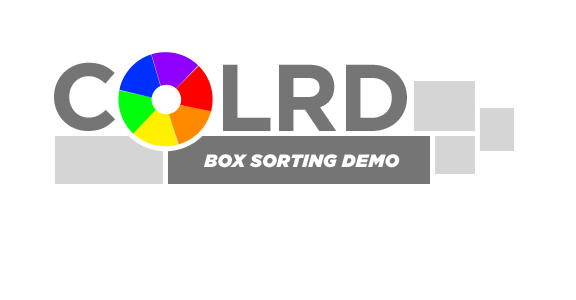
<style>
.page{position:relative;width:576px;height:300px;background:#ffffff}
.page>*{position:absolute;margin:0}
.t1{font:94.6px "GothamHTF-Bold";letter-spacing:-0.005em;color:#757575;text-transform:uppercase}
.t2{font:18px "GothamHTF-UltraItalic";letter-spacing:0.02em;color:#ffffff;text-transform:uppercase}
</style>
<div class="page">
<p class="t1" style="left:54px;top:62px;width:61px;height:69px">c</p>
<p class="t1" style="left:223px;top:64px;width:184px;height:67px">lrd</p>
<p class="t2" style="left:204px;top:154px;width:196px;height:14px">Box Sorting Demo</p>
</div>
